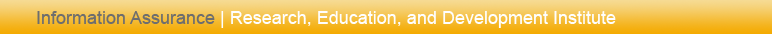
<style>
.page{position:relative;width:772px;height:34px}
.page>*{position:absolute;margin:0}
.t1{font:18px "ArialMT";color:#fefefe}
.t2{font:18px "ArialMT";color:#6e6e6e}
.t3{font:18px "ArialMT";color:#ffffff}
</style>
<div class="page">
<p class="t1" style="left:37px;top:11px;width:579px;height:17px"><span class="t2">Information Assurance </span><span class="t3">| </span>Research, Education, and Development Institute</p>
</div>
